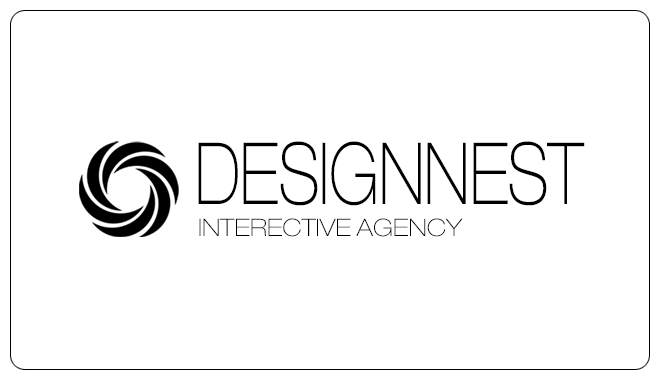
<style>
.page{position:relative;width:660px;height:380px;background:#ffffff}
.page>*{position:absolute;margin:0}
.t1{font:85.6px "Helvetica33-ExtendedThin";color:#000000;scale:0.7 1}
.t2{font:24px "Helvetica33-ExtendedThin";color:#000000}
</style>
<div class="page">
<p class="t1" style="left:198px;top:141px;width:387px;height:65px">DESIGNNEST</p>
<p class="t2" style="left:199px;top:218px;width:264px;height:19px">INTERECTIVE AGENCY</p>
</div>
